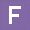
<style>
.page{position:relative;width:30px;height:30px;background:#8368a6}
.page>*{position:absolute;margin:0}
.t1{font:24px "DIN-Regular";letter-spacing:0.075em;color:#ffffff;font-weight:bold}
</style>
<div class="page">
<p class="t1" style="left:9px;top:6px;width:12px;height:18px">F</p>
</div>
